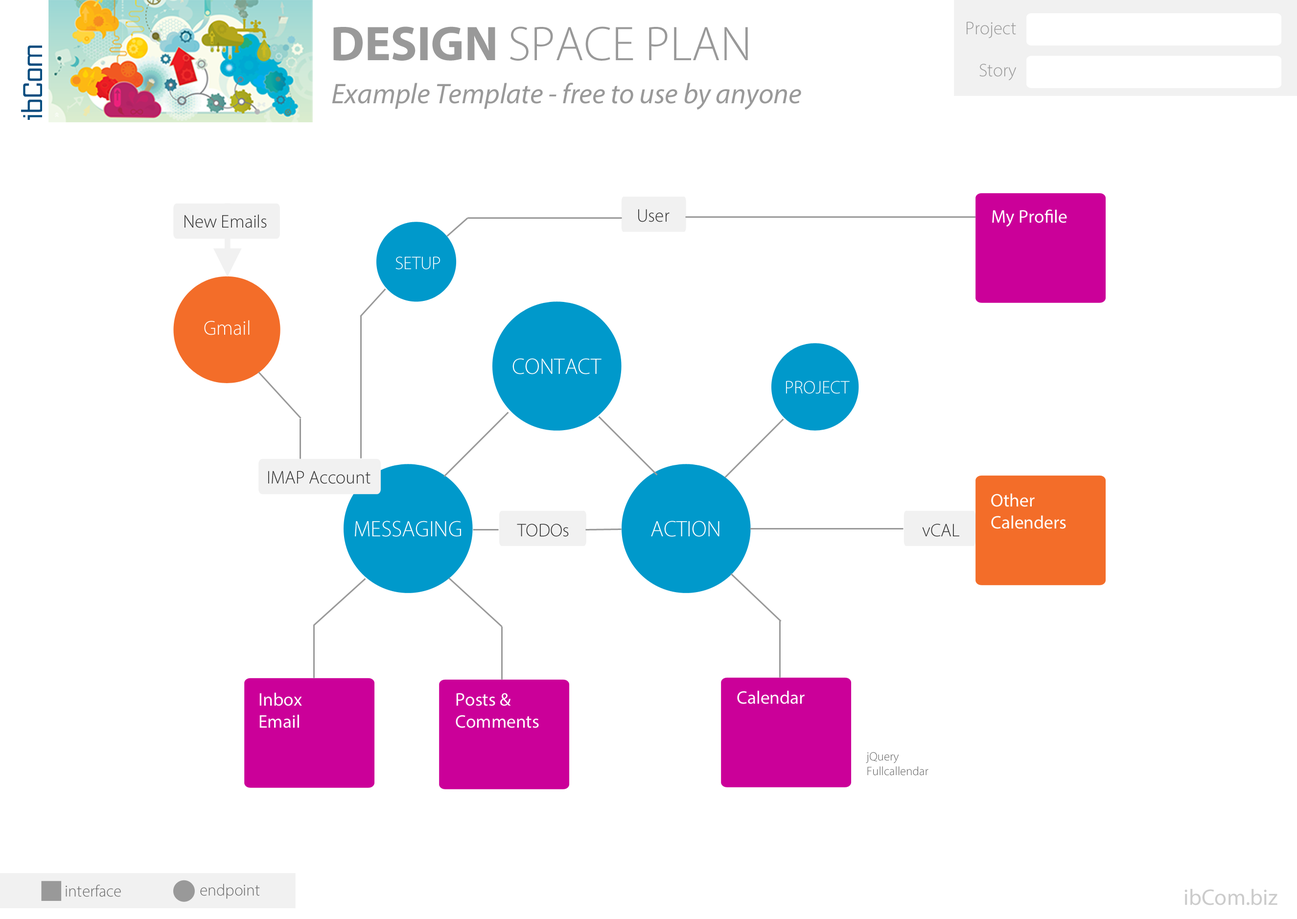
<style>
.page{position:relative;width:1297px;height:919px;background:#ffffff}
.page>*{position:absolute;margin:0}
.t1{font:48.9px "MyriadPro-Light";color:#999999}
.t2{font:48.9px "MyriadPro-Bold";color:#999999}
.t3{font:18.4px "MyriadPro-Light";color:#999999}
.t4{font:28.6px "MyriadPro-It";color:#999999}
.t5{font:18.4px "MyriadPro-Light";color:#333333}
.t6{font:18.4px "MyriadPro-Regular";color:#ffffff}
.t7{font:18.4px "MyriadPro-Light";color:#ffffff}
.t8{font:20.4px "MyriadPro-Light";color:#ffffff}
.t9{font:22.4px "MyriadPro-Light";color:#ffffff}
.t10{font:12.2px "MyriadPro-Light";color:#656565}
.t11{font:16.3px "MyriadPro-Light";color:#656565}
.t12{font:22.4px "MyriadPro-Regular";color:#cbcbcb}
</style>
<div class="page">
<p class="t1" style="left:333px;top:26px;width:415px;height:35px"><span class="t2">DESIGN </span>SPACE PLAN</p>
<p class="t3" style="left:967px;top:22px;width:49px;height:16px">Project</p>
<p class="t3" style="left:979px;top:64px;width:38px;height:16px">Story</p>
<p class="t4" style="left:332px;top:83px;width:469px;height:27px">Example Template - free to use by anyone</p>
<p class="t5" style="left:638px;top:209px;width:32px;height:13px">User</p>
<p class="t6" style="left:992px;top:210px;width:75px;height:17px">My Profile</p>
<p class="t5" style="left:185px;top:214px;width:82px;height:14px">New Emails</p>
<p class="t7" style="left:396px;top:256px;width:44px;height:14px">SETUP</p>
<p class="t8" style="left:204px;top:320px;width:46px;height:15px">Gmail</p>
<p class="t9" style="left:512px;top:358px;width:90px;height:16px">CONTACT</p>
<p class="t7" style="left:786px;top:381px;width:64px;height:13px">PROJECT</p>
<p class="t5" style="left:268px;top:471px;width:103px;height:13px">IMAP Account</p>
<p class="t6" style="left:991px;top:493px;width:75px;height:36px">Other<br>Calenders</p>
<p class="t9" style="left:355px;top:521px;width:106px;height:16px">MESSAGING</p>
<p class="t9" style="left:651px;top:521px;width:69px;height:16px">ACTION</p>
<p class="t5" style="left:517px;top:524px;width:52px;height:13px">TODOs</p>
<p class="t5" style="left:922px;top:524px;width:37px;height:13px">vCAL</p>
<p class="t6" style="left:259px;top:693px;width:43px;height:35px">Inbox<br>Email</p>
<p class="t6" style="left:456px;top:693px;width:83px;height:35px">Posts &amp;<br>Comments</p>
<p class="t6" style="left:737px;top:691px;width:68px;height:13px">Calendar</p>
<p class="t10" style="left:866px;top:752px;width:63px;height:24px">jQuery<br>Fullcallendar</p>
<p class="t11" style="left:66px;top:885px;width:55px;height:12px">interface</p>
<p class="t11" style="left:200px;top:884px;width:60px;height:15px">endpoint</p>
<p class="t12" style="left:1185px;top:889px;width:93px;height:17px">ibCom.biz</p>
</div>
